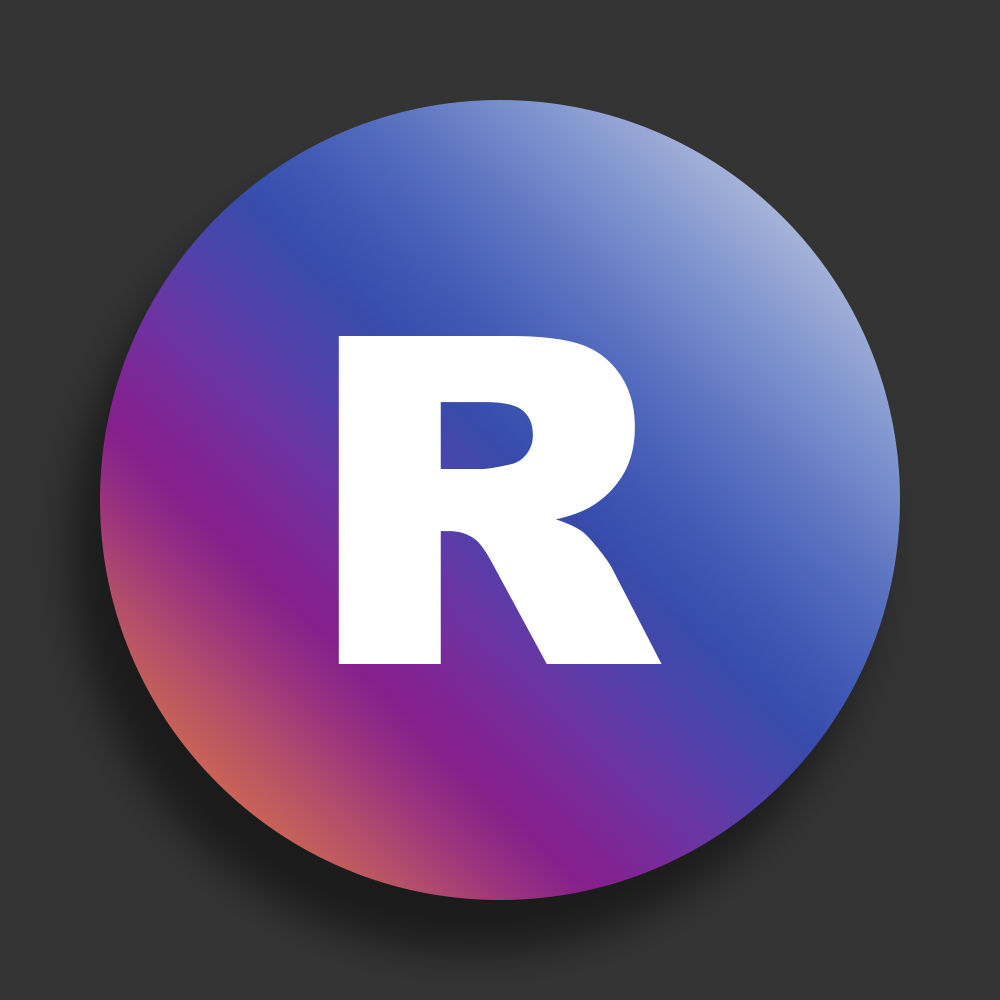
<style>
.page{position:relative;width:1000px;height:1000px;background:#333333}
.page>*{position:absolute;margin:0}
.t1{font:458.3px "Arial-Black";color:#ffffff}
</style>
<div class="page">
<p class="t1" style="left:338px;top:336px;width:324px;height:328px">R</p>
</div>
